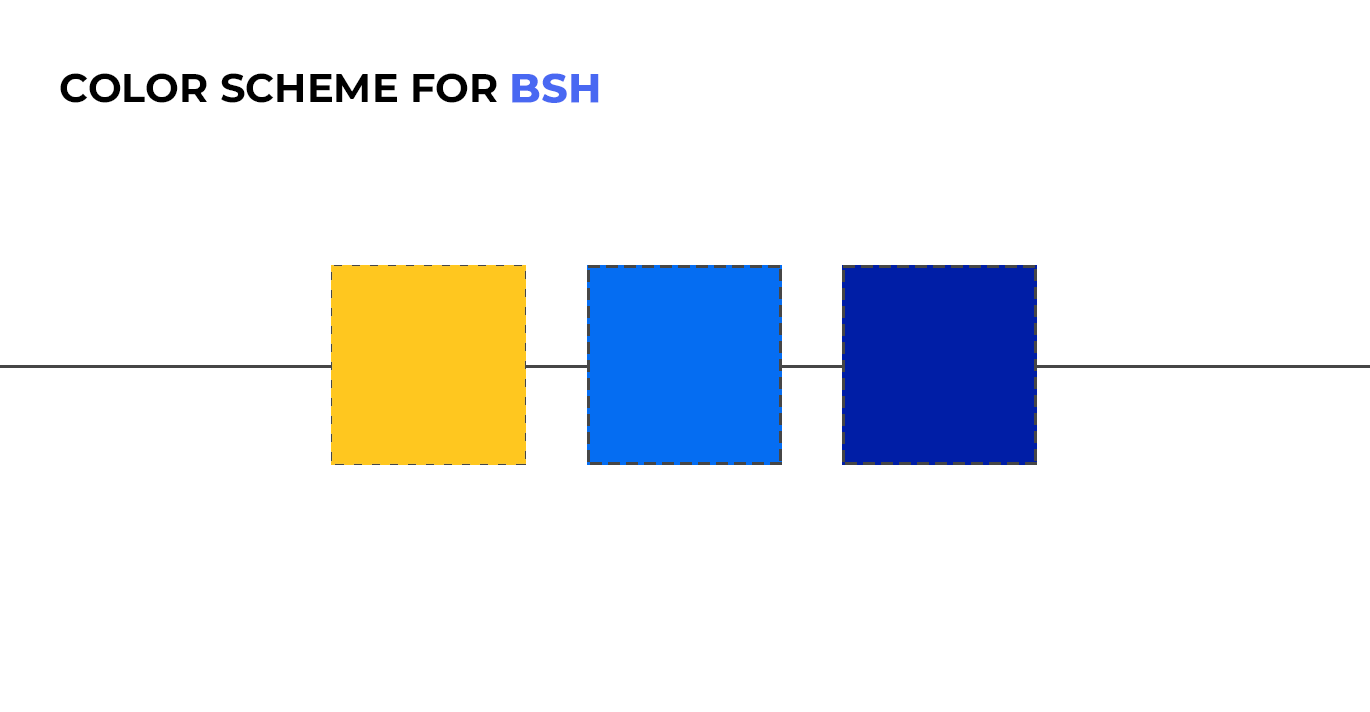
<style>
.page{position:relative;width:1370px;height:712px;background:#ffffff}
.page>*{position:absolute;margin:0}
.t1{font:40px "Montserrat-Bold";color:#000000;text-transform:uppercase}
.t2{font:40px "Montserrat-Bold";color:#4968f2;text-transform:uppercase;font-weight:bold}
</style>
<div class="page">
<p class="t1" style="left:60px;top:73px;width:539px;height:30px">Color Scheme for <span class="t2">BSH</span></p>
</div>
